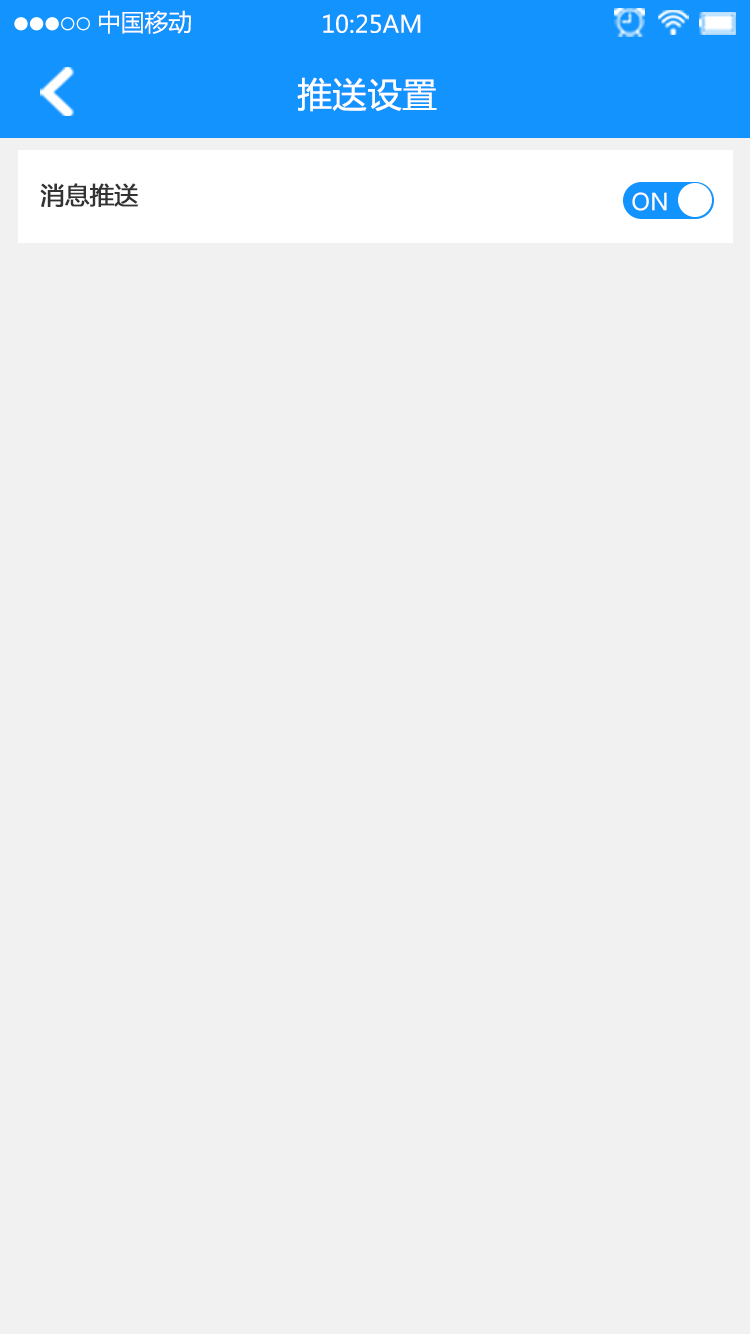
<style>
.page{position:relative;width:750px;height:1334px;background:#f1f1f1}
.page>*{position:absolute;margin:0}
.t1{font:23.7px "MicrosoftYaHei";color:#ffffff}
.t2{font:34px "MicrosoftYaHei";color:#ffffff;font-weight:bold}
.t3{font:24px "MicrosoftYaHei";color:#333333;font-weight:bold}
.t4{font:23px "MicrosoftYaHei";color:#ffffff}
</style>
<div class="page">
<p class="t1" style="left:99px;top:10px;width:92px;height:24px">中国移动</p>
<p class="t1" style="left:323px;top:14px;width:98px;height:19px">10:25AM</p>
<p class="t2" style="left:297px;top:77px;width:140px;height:35px">推送设置</p>
<p class="t3" style="left:40px;top:183px;width:99px;height:24px">消息推送</p>
<p class="t4" style="left:632px;top:192px;width:35px;height:19px">ON</p>
</div>
